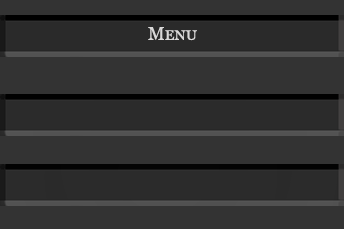
<style>
.page{position:relative;width:344px;height:229px;background:#333333}
.page>*{position:absolute;margin:0}
.t1{font:18.2px "Georgia";color:#d9d8d8;font-variant:small-caps}
</style>
<div class="page">
<p class="t1" style="left:148px;top:27px;width:49px;height:14px">Menu</p>
</div>
